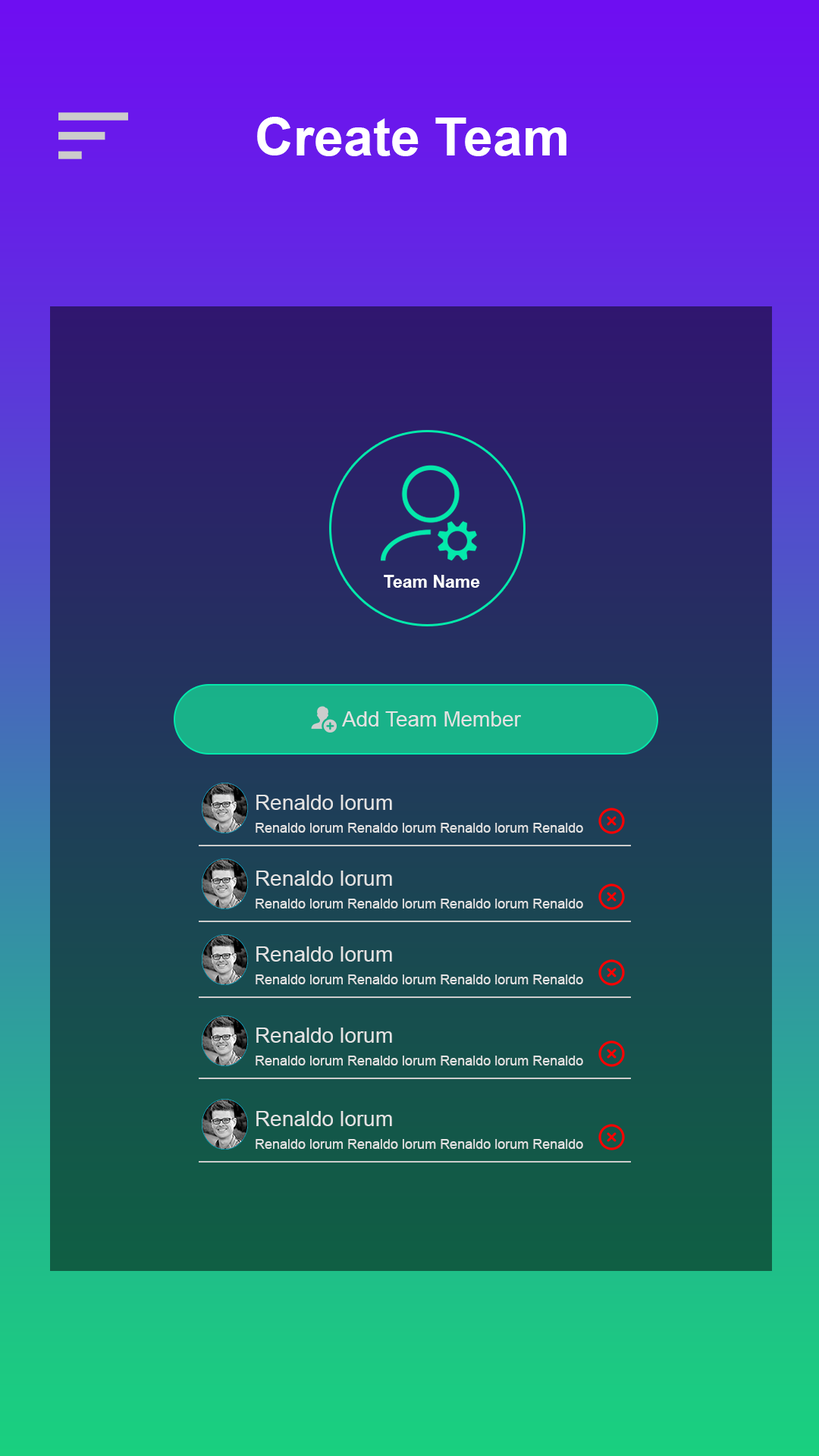
<style>
.page{position:relative;width:819px;height:1456px}
.page>*{position:absolute;margin:0}
.t1{font:53.1px "Arial-BoldMT";color:#ffffff}
.t2{font:17.4px "Arial-BoldMT";color:#ffffff}
.t3{font:21.2px "ArialMT";color:#e3e3e3}
.t4{font:13.6px "ArialMT";color:#e3e3e3}
</style>
<div class="page">
<p class="t1" style="left:257px;top:117px;width:309px;height:39px">Create Team</p>
<p class="t2" style="left:384px;top:575px;width:96px;height:13px">Team Name</p>
<p class="t3" style="left:342px;top:711px;width:179px;height:15px">Add Team Member</p>
<p class="t3" style="left:256px;top:795px;width:136px;height:15px">Renaldo lorum</p>
<p class="t4" style="left:256px;top:823px;width:327px;height:10px">Renaldo lorum Renaldo lorum Renaldo lorum Renaldo</p>
<p class="t3" style="left:256px;top:871px;width:136px;height:15px">Renaldo lorum</p>
<p class="t4" style="left:256px;top:899px;width:327px;height:9px">Renaldo lorum Renaldo lorum Renaldo lorum Renaldo</p>
<p class="t3" style="left:256px;top:946px;width:136px;height:16px">Renaldo lorum</p>
<p class="t4" style="left:256px;top:974px;width:327px;height:10px">Renaldo lorum Renaldo lorum Renaldo lorum Renaldo</p>
<p class="t3" style="left:256px;top:1028px;width:136px;height:15px">Renaldo lorum</p>
<p class="t4" style="left:256px;top:1056px;width:327px;height:9px">Renaldo lorum Renaldo lorum Renaldo lorum Renaldo</p>
<p class="t3" style="left:256px;top:1111px;width:136px;height:15px">Renaldo lorum</p>
<p class="t4" style="left:256px;top:1139px;width:327px;height:10px">Renaldo lorum Renaldo lorum Renaldo lorum Renaldo</p>
</div>
